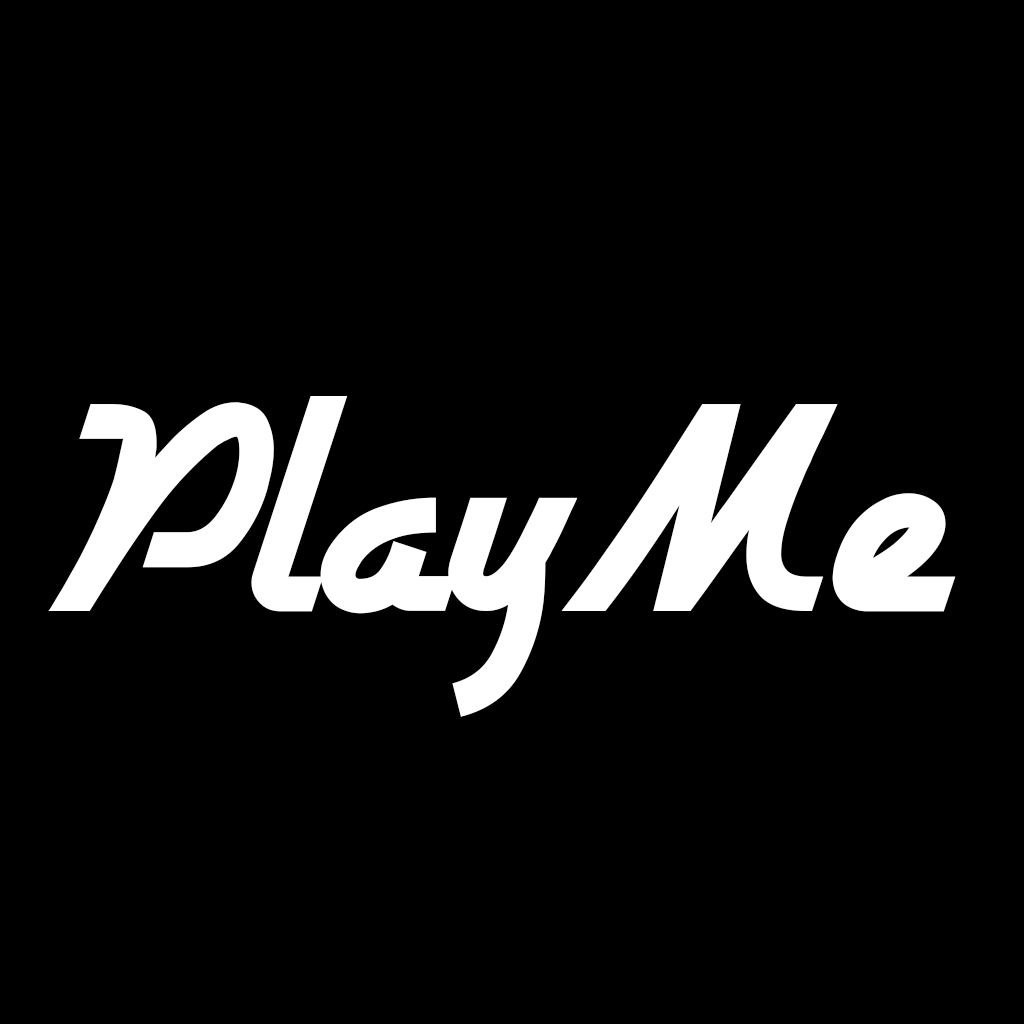
<style>
.page{position:relative;width:1024px;height:1024px;background:#000000}
.page>*{position:absolute;margin:0}
.t1{font:350px "Airstream";color:#ffffff}
</style>
<div class="page">
<p class="t1" style="left:48px;top:396px;width:908px;height:321px">PlayMe</p>
</div>
